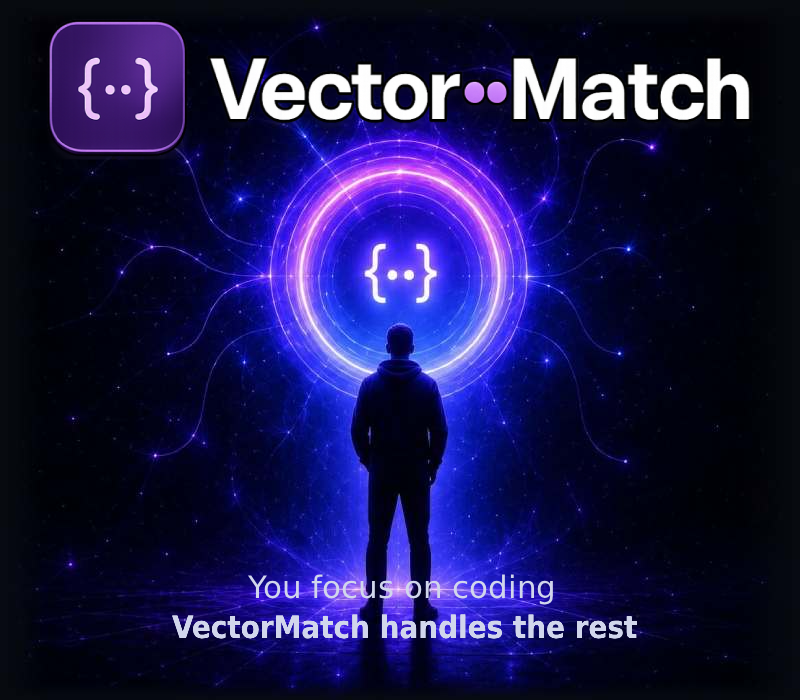
<style>
.page{position:relative;width:800px;height:700px}
.page>*{position:absolute;margin:0}
.t1{font:31px "DejaVuSans";color:#d1d6ec}
.t2{font:31px "DejaVuSansCondensed-Bold";color:#d1d6ec}
</style>
<div class="page">
<p class="t1" style="left:247px;top:574px;width:306px;height:31px">You focus on coding</p>
<p class="t2" style="left:172px;top:614px;width:465px;height:25px">VectorMatch handles the rest</p>
</div>
